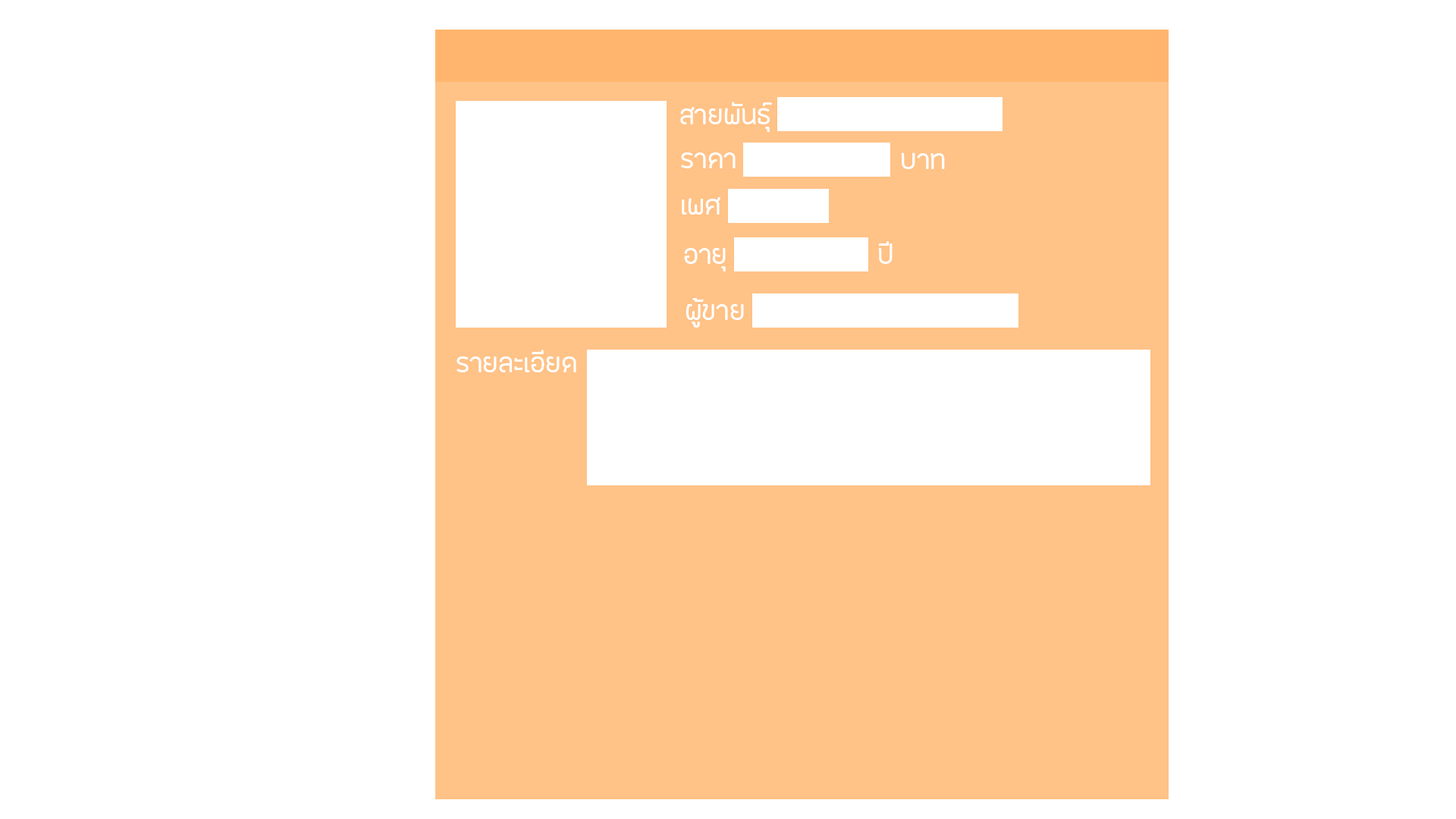
<style>
.page{position:relative;width:1456px;height:819px;background:#ffffff}
.page>*{position:absolute;margin:0}
.t1{font:37.9px "FCLamoonRegular";color:#ffffff}
</style>
<div class="page">
<p class="t1" style="left:680px;top:102px;width:92px;height:30px">สายพันธ์ุ</p>
<p class="t1" style="left:681px;top:152px;width:55px;height:16px">ราคา</p>
<p class="t1" style="left:901px;top:152px;width:44px;height:17px">บาท</p>
<p class="t1" style="left:682px;top:197px;width:38px;height:18px">เพศ</p>
<p class="t1" style="left:878px;top:241px;width:15px;height:23px">ปี</p>
<p class="t1" style="left:684px;top:248px;width:42px;height:23px">อายุ</p>
<p class="t1" style="left:686px;top:298px;width:58px;height:30px">ผู้ขาย</p>
<p class="t1" style="left:457px;top:350px;width:119px;height:22px">รายละเอียด</p>
</div>
